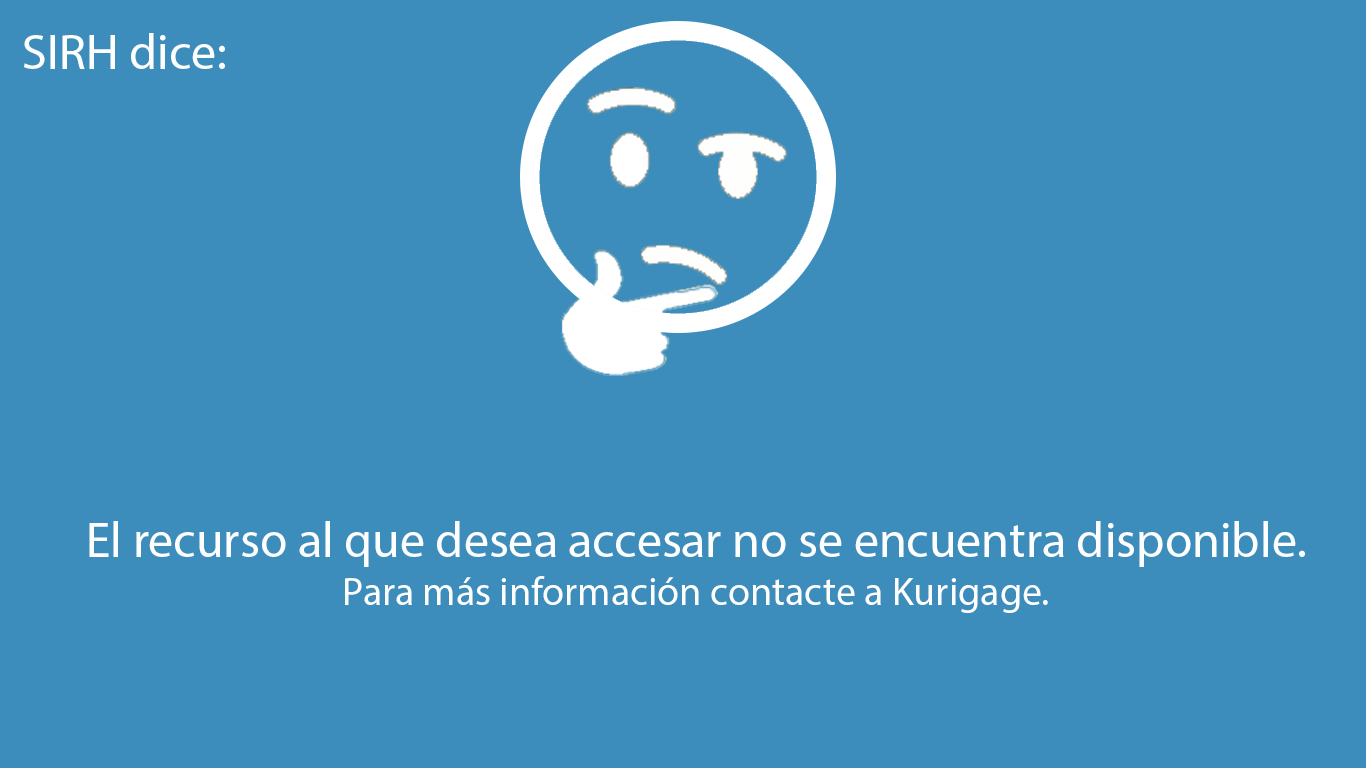
<style>
.page{position:relative;width:1366px;height:768px;background:#3c8dbc}
.page>*{position:absolute;margin:0}
.t1{font:50px "MyriadPro-Regular";color:#fdfefe}
.t2{font:40px "MyriadPro-Regular";color:#fdfefe}
</style>
<div class="page">
<p class="t1" style="left:23px;top:33px;width:202px;height:36px">SIRH dice:</p>
<p class="t1" style="left:89px;top:521px;width:1216px;height:92px;text-align:center">El recurso al que desea accesar no se encuentra disponible.     <span class="t2">Para más información contacte a Kurigage.</span></p>
</div>
